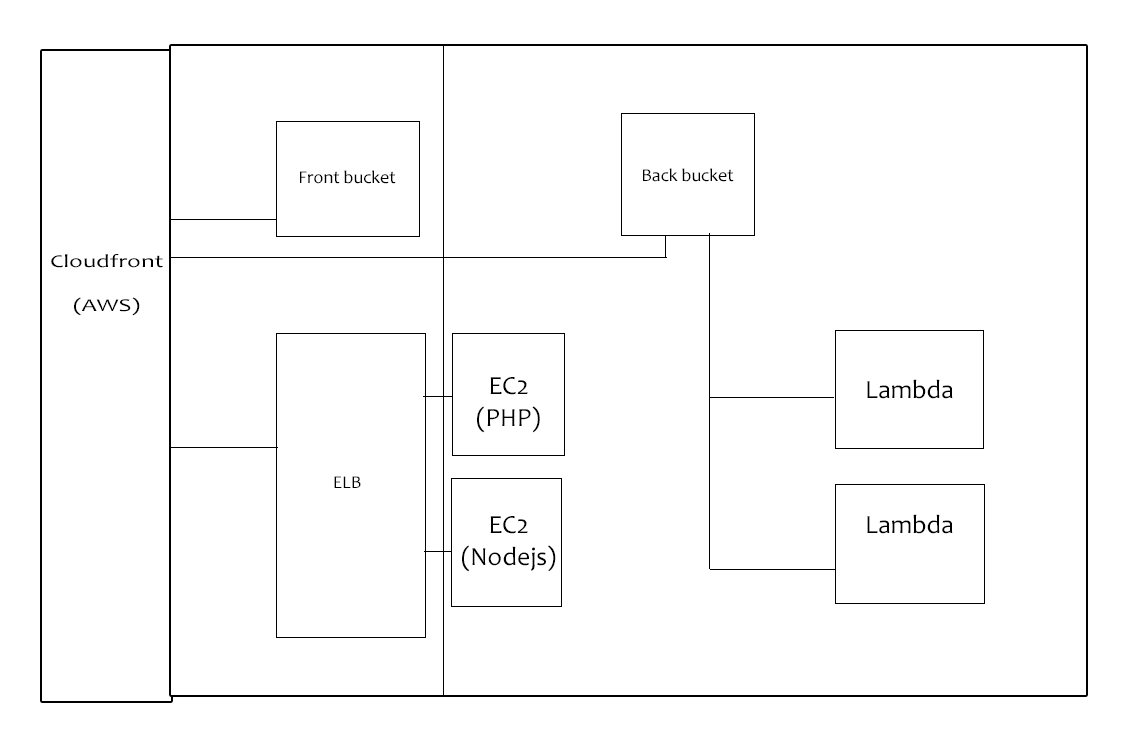
<style>
.page{position:relative;width:1122px;height:744px;background:#ffffff}
.page>*{position:absolute;margin:0}
.t1{font:18px "Candara";color:#000000}
.t2{font:18.3px "Candara";color:#000000;scale:1.35 1}
.t3{font:26.2px "Candara";color:#000000}
</style>
<div class="page">
<p class="t1" style="left:300px;top:170px;width:96px;height:14px">Front bucket</p>
<p class="t1" style="left:643px;top:168px;width:91px;height:14px">Back bucket</p>
<p class="t2" style="left:51px;top:254px;width:112px;height:62px;text-align:center">Cloudfront<br><br>(AWS)</p>
<p class="t3" style="left:477px;top:377px;width:63px;height:56px;text-align:center">EC2<br>(PHP)</p>
<p class="t3" style="left:867px;top:379px;width:86px;height:20px">Lambda</p>
<p class="t1" style="left:334px;top:476px;width:27px;height:12px">ELB</p>
<p class="t3" style="left:462px;top:516px;width:94px;height:56px;text-align:center">EC2<br>(Nodejs)</p>
<p class="t3" style="left:867px;top:514px;width:86px;height:20px">Lambda</p>
</div>
